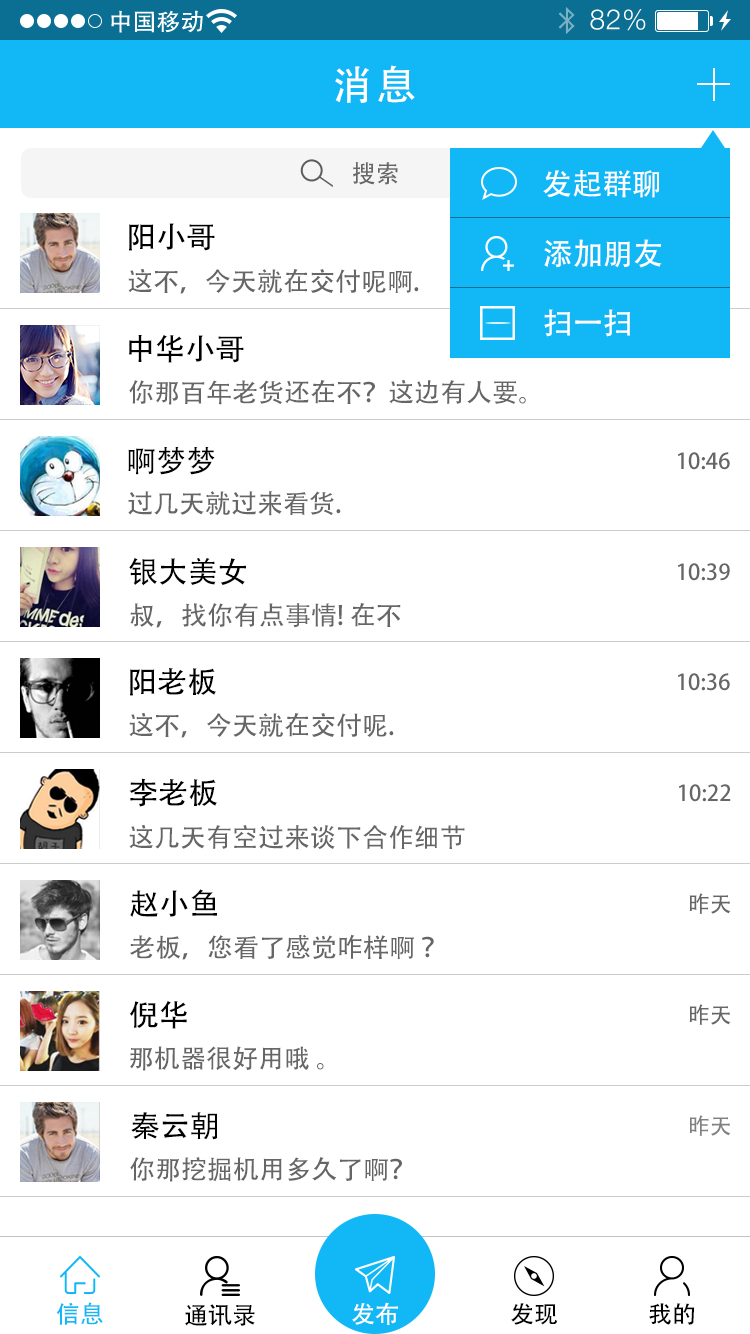
<style>
.page{position:relative;width:750px;height:1334px;background:#ffffff}
.page>*{position:absolute;margin:0}
.t1{font:40px "AdobeHeitiStd-Regular";letter-spacing:0.104em;color:#ffffff}
.t2{font:24px "AdobeHeitiStd-Regular";color:#666666}
.t3{font:30px "AdobeHeitiStd-Regular";color:#ffffff}
.t4{font:30px "AdobeHeitiStd-Regular";color:#000000}
.t5{font:26px "AdobeHeitiStd-Regular";color:#666666}
.t6{font:22px "AdobeHeitiStd-Regular";color:#666666}
.t7{font:22px "AdobeHeitiStd-Regular";color:#808080}
.t8{font:24px "AdobeHeitiStd-Regular";color:#12b8f6}
.t9{font:24px "AdobeHeitiStd-Regular";color:#ffffff}
.t10{font:24px "AdobeHeitiStd-Regular";color:#000000}
</style>
<div class="page">
<p class="t1" style="left:335px;top:65px;width:80px;height:38px">消息</p>
<p class="t2" style="left:353px;top:162px;width:45px;height:23px">搜索</p>
<p class="t3" style="left:543px;top:170px;width:117px;height:28px">发起群聊</p>
<p class="t4" style="left:129px;top:223px;width:86px;height:28px">阳小哥</p>
<p class="t3" style="left:544px;top:239px;width:118px;height:29px">添加朋友</p>
<p class="t5" style="left:128px;top:268px;width:291px;height:26px">这不，今天就在交付呢啊.</p>
<p class="t3" style="left:544px;top:309px;width:86px;height:28px">扫一扫</p>
<p class="t4" style="left:129px;top:334px;width:115px;height:29px">中华小哥</p>
<p class="t5" style="left:129px;top:379px;width:397px;height:26px">你那百年老货还在不？这边有人要。</p>
<p class="t4" style="left:128px;top:447px;width:87px;height:28px">啊梦梦</p>
<p class="t6" style="left:677px;top:452px;width:53px;height:18px">10:46</p>
<p class="t5" style="left:128px;top:491px;width:213px;height:25px">过几天就过来看货.</p>
<p class="t4" style="left:129px;top:557px;width:117px;height:29px">银大美女</p>
<p class="t6" style="left:677px;top:563px;width:53px;height:18px">10:39</p>
<p class="t5" style="left:130px;top:603px;width:271px;height:25px">叔，找你有点事情! 在不</p>
<p class="t4" style="left:130px;top:668px;width:86px;height:28px">阳老板</p>
<p class="t6" style="left:677px;top:673px;width:53px;height:18px">10:36</p>
<p class="t5" style="left:129px;top:712px;width:265px;height:26px">这不，今天就在交付呢.</p>
<p class="t4" style="left:129px;top:778px;width:88px;height:29px">李老板</p>
<p class="t6" style="left:678px;top:784px;width:53px;height:18px">10:22</p>
<p class="t5" style="left:129px;top:824px;width:336px;height:26px">这几天有空过来谈下合作细节</p>
<p class="t4" style="left:130px;top:889px;width:87px;height:28px">赵小鱼</p>
<p class="t6" style="left:689px;top:893px;width:42px;height:21px">昨天</p>
<p class="t5" style="left:130px;top:934px;width:304px;height:26px">老板，您看了感觉咋样啊 ？</p>
<p class="t4" style="left:129px;top:1000px;width:58px;height:29px">倪华</p>
<p class="t6" style="left:689px;top:1004px;width:42px;height:21px">昨天</p>
<p class="t5" style="left:130px;top:1046px;width:194px;height:25px">那机器很好用哦 。</p>
<p class="t4" style="left:131px;top:1112px;width:86px;height:28px">秦云朝</p>
<p class="t7" style="left:689px;top:1115px;width:42px;height:21px">昨天</p>
<p class="t5" style="left:130px;top:1157px;width:272px;height:25px">你那挖掘机用多久了啊？</p>
<p class="t8" style="left:56px;top:1302px;width:47px;height:23px">信息</p>
<p class="t9" style="left:352px;top:1302px;width:46px;height:23px">发布</p>
<p class="t10" style="left:185px;top:1304px;width:70px;height:22px">通讯录</p>
<p class="t10" style="left:511px;top:1303px;width:47px;height:22px">发现</p>
<p class="t10" style="left:649px;top:1303px;width:46px;height:22px">我的</p>
</div>
